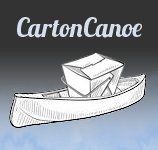
<style>
.page{position:relative;width:158px;height:150px;background:#333333}
.page>*{position:absolute;margin:0}
.t1{font:26px "Lobster1.3";color:#d6e0ed}
</style>
<div class="page">
<p class="t1" style="left:17px;top:17px;width:125px;height:21px">CartonCanoe</p>
</div>
